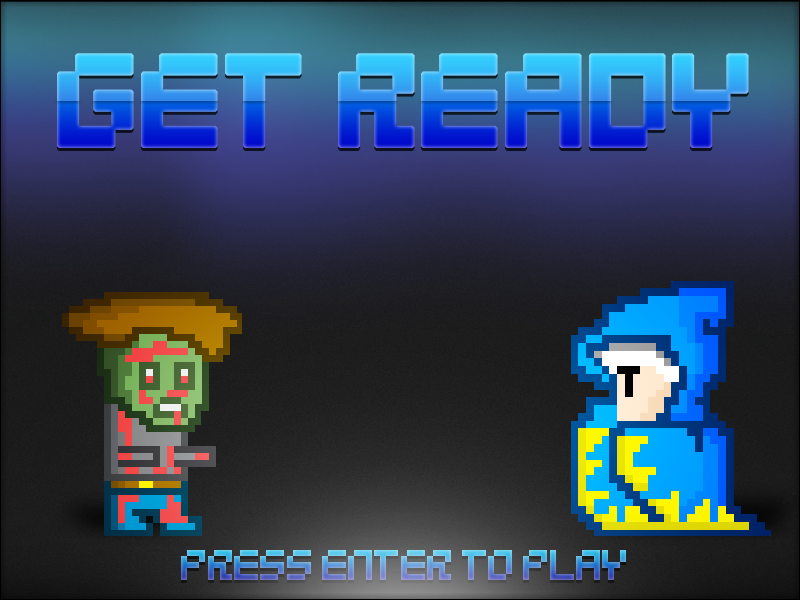
<style>
.page{position:relative;width:800px;height:600px}
.page>*{position:absolute;margin:0}
.t1{font:145px "5Mikropix";letter-spacing:-0.075em;font-weight:bold}
.t2{font:48px "5Mikropix";letter-spacing:-0.075em}
</style>
<div class="page">
<p class="t1" style="left:57px;top:53px;width:692px;height:95px">GET READY</p>
<p class="t2" style="left:181px;top:550px;width:445px;height:30px">PRESS ENTER TO PLAY</p>
</div>
